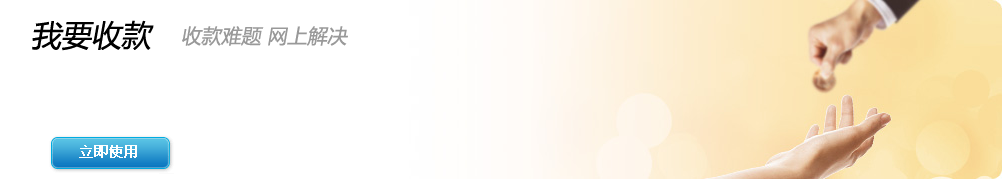
<style>
.page{position:relative;width:1002px;height:179px;background:#ffffff}
.page>*{position:absolute;margin:0}
.t1{font:30px "MicrosoftYaHei";color:#000000;font-style:italic}
.t2{font:20px "MicrosoftYaHei";color:#999999;font-style:italic}
</style>
<div class="page">
<p class="t1" style="left:32px;top:20px;width:122px;height:31px">我要收款</p>
<p class="t2" style="left:182px;top:26px;width:166px;height:20px">收款难题 网上解决</p>
</div>
